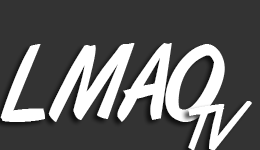
<style>
.page{position:relative;width:260px;height:150px;background:#333333}
.page>*{position:absolute;margin:0}
.t1{font:104.5px "ArtBrush";color:#ffffff;scale:0.88 1}
.t2{font:66.4px "ArtBrush";color:#ffffff;scale:0.89 1}
</style>
<div class="page">
<p class="t1" style="left:0px;top:43px;width:225px;height:79px">LMAO</p>
<p class="t2" style="left:188px;top:101px;width:64px;height:50px">TV</p>
</div>
